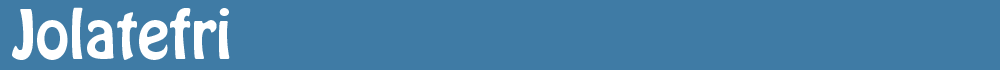
<style>
.page{position:relative;width:1000px;height:70px;background:#3f7ba5}
.page>*{position:absolute;margin:0}
.t1{font:60px "HoboStd";color:#ffffff}
</style>
<div class="page">
<p class="t1" style="left:12px;top:7px;width:218px;height:53px">Jolatefri</p>
</div>
